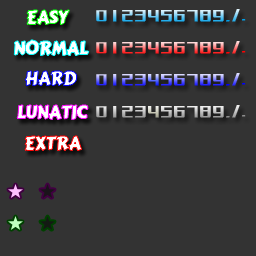
<style>
.page{position:relative;width:256px;height:256px;background:#333333}
.page>*{position:absolute;margin:0}
.t1{font:18px "CarterOne";color:#ffffff;font-weight:bold}
.t2{font:16px "MFBoHei_Noncommercial-Regular";letter-spacing:0.15em;font-weight:bold}
.t3{font:16px "MFBoHei_Noncommercial-Regular";letter-spacing:0.15em;color:#00a0e9;font-weight:bold}
.t4{font:16px "MFBoHei_Noncommercial-Regular";letter-spacing:0.15em;color:#ff0000;font-weight:bold}
.t5{font:16px "MFBoHei_Noncommercial-Regular";letter-spacing:0.15em;color:#0000ff;font-weight:bold}
.t6{font:16px "MFBoHei_Noncommercial-Regular";letter-spacing:0.15em;color:#8c8c8c;font-weight:bold}
</style>
<div class="page">
<p class="t1" style="left:27px;top:10px;width:43px;height:15px">EASY</p>
<p class="t2" style="left:96px;top:10px;width:11px;height:12px">0</p>
<p class="t2" style="left:113px;top:10px;width:4px;height:12px">1</p>
<p class="t2" style="left:122px;top:10px;width:11px;height:12px">2</p>
<p class="t2" style="left:135px;top:10px;width:11px;height:12px">3</p>
<p class="t2" style="left:148px;top:10px;width:11px;height:12px">4</p>
<p class="t2" style="left:161px;top:10px;width:11px;height:12px">5</p>
<p class="t2" style="left:174px;top:10px;width:11px;height:12px">6</p>
<p class="t2" style="left:187px;top:10px;width:11px;height:12px">7</p>
<p class="t2" style="left:200px;top:10px;width:11px;height:12px">8</p>
<p class="t2" style="left:213px;top:10px;width:11px;height:12px">9</p>
<p class="t2" style="left:232px;top:9px;width:8px;height:13px">/</p>
<p class="t3" style="left:226px;top:20px;width:4px;height:2px">,</p>
<p class="t3" style="left:242px;top:19px;width:4px;height:2px">.</p>
<p class="t1" style="left:14px;top:40px;width:75px;height:16px">NORMAL</p>
<p class="t2" style="left:232px;top:41px;width:8px;height:13px">/</p>
<p class="t2" style="left:96px;top:42px;width:11px;height:12px">0</p>
<p class="t2" style="left:113px;top:42px;width:4px;height:12px">1</p>
<p class="t2" style="left:122px;top:42px;width:11px;height:12px">2</p>
<p class="t2" style="left:135px;top:42px;width:11px;height:12px">3</p>
<p class="t2" style="left:148px;top:42px;width:11px;height:12px">4</p>
<p class="t2" style="left:161px;top:42px;width:11px;height:12px">5</p>
<p class="t2" style="left:174px;top:42px;width:11px;height:12px">6</p>
<p class="t2" style="left:187px;top:42px;width:11px;height:12px">7</p>
<p class="t2" style="left:200px;top:42px;width:11px;height:12px">8</p>
<p class="t2" style="left:213px;top:42px;width:11px;height:12px">9</p>
<p class="t4" style="left:226px;top:52px;width:4px;height:2px">,</p>
<p class="t4" style="left:242px;top:51px;width:4px;height:2px">.</p>
<p class="t1" style="left:25px;top:71px;width:52px;height:15px">HARD</p>
<p class="t2" style="left:96px;top:74px;width:11px;height:12px">0</p>
<p class="t2" style="left:113px;top:74px;width:4px;height:12px">1</p>
<p class="t2" style="left:122px;top:74px;width:11px;height:12px">2</p>
<p class="t2" style="left:135px;top:74px;width:11px;height:12px">3</p>
<p class="t2" style="left:148px;top:74px;width:11px;height:12px">4</p>
<p class="t2" style="left:161px;top:74px;width:11px;height:12px">5</p>
<p class="t2" style="left:174px;top:74px;width:11px;height:12px">6</p>
<p class="t2" style="left:187px;top:74px;width:11px;height:12px">7</p>
<p class="t2" style="left:200px;top:74px;width:11px;height:12px">8</p>
<p class="t2" style="left:213px;top:74px;width:11px;height:12px">9</p>
<p class="t2" style="left:232px;top:73px;width:8px;height:13px">/</p>
<p class="t5" style="left:226px;top:84px;width:4px;height:2px">,</p>
<p class="t5" style="left:242px;top:83px;width:4px;height:2px">.</p>
<p class="t1" style="left:17px;top:105px;width:71px;height:15px">LUNATIC</p>
<p class="t2" style="left:96px;top:106px;width:11px;height:12px">0</p>
<p class="t2" style="left:113px;top:106px;width:4px;height:12px">1</p>
<p class="t2" style="left:122px;top:106px;width:11px;height:12px">2</p>
<p class="t2" style="left:135px;top:106px;width:11px;height:12px">3</p>
<p class="t2" style="left:148px;top:106px;width:11px;height:12px">4</p>
<p class="t2" style="left:161px;top:106px;width:11px;height:12px">5</p>
<p class="t2" style="left:174px;top:106px;width:11px;height:12px">6</p>
<p class="t2" style="left:187px;top:106px;width:11px;height:12px">7</p>
<p class="t2" style="left:200px;top:106px;width:11px;height:12px">8</p>
<p class="t2" style="left:213px;top:106px;width:11px;height:12px">9</p>
<p class="t2" style="left:232px;top:105px;width:8px;height:13px">/</p>
<p class="t6" style="left:226px;top:116px;width:4px;height:2px">,</p>
<p class="t6" style="left:242px;top:115px;width:4px;height:2px">.</p>
<p class="t1" style="left:25px;top:136px;width:57px;height:15px">EXTRA</p>
</div>
